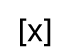
<style>
.page{position:relative;width:70px;height:55px;background:#ffffff}
.page>*{position:absolute;margin:0}
.t1{font:31.8px "DroidSans";color:#000000}
</style>
<div class="page">
<p class="t1" style="left:20px;top:18px;width:31px;height:29px">[x]</p>
</div>
